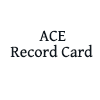
<style>
.page{position:relative;width:100px;height:100px;background:#ffffff}
.page>*{position:absolute;margin:0}
.t1{font:16px/16px "GentiumBookBasic";color:#101820}
.t2{font:12px/10px "BradleyHandITC";color:#56e49b}
</style>
<div class="page">
<p class="t1" style="left:10px;top:30px;width:83px;height:28px"><span class="t2"> </span>       ACE<br>Record Card</p>
</div>
